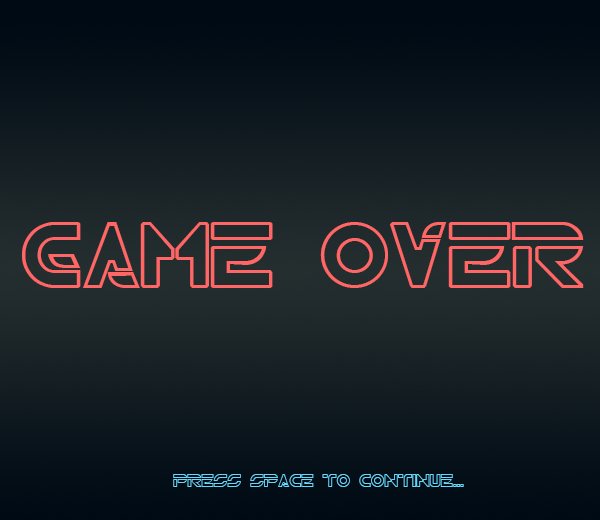
<style>
.page{position:relative;width:600px;height:520px}
.page>*{position:absolute;margin:0}
.t1{font:94px "TRN";color:#ff6666}
.t2{font:18.3px "TRN";color:#66d9ff}
</style>
<div class="page">
<p class="t1" style="left:21px;top:222px;width:563px;height:66px">Game Over</p>
<p class="t2" style="left:173px;top:474px;width:291px;height:13px">Press space to continue...</p>
</div>
